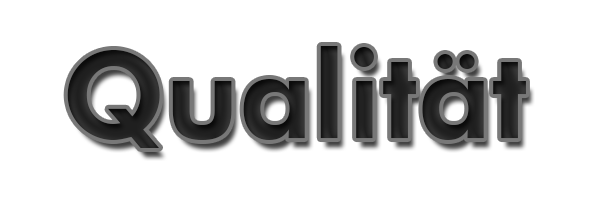
<style>
.page{position:relative;width:600px;height:200px;background:#ffffff}
.page>*{position:absolute;margin:0}
.t1{font:120px "FuturaBT-Heavy";color:#212121}
</style>
<div class="page">
<p class="t1" style="left:67px;top:46px;width:459px;height:102px">Qualität</p>
</div>
